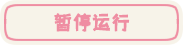
<style>
.page{position:relative;width:183px;height:45px;background:#f7f3e9}
.page>*{position:absolute;margin:0}
.t1{font:12px "shetumodengxiaofangti";color:#ef8da2;font-weight:bold;scale:0.94 1}
</style>
<div class="page">
<p class="t1" style="left:54px;top:13px;width:76px;height:19px">暂停运行</p>
</div>
